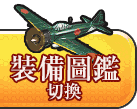
<style>
.page{position:relative;width:137px;height:109px}
.page>*{position:absolute;margin:0}
.t1{font:28px "RyuminPro-Bold";color:#f9f1ec}
.t2{font:18px "RyuminPro-Bold";color:#f9f1ec}
</style>
<div class="page">
<p class="t1" style="left:11px;top:55px;width:108px;height:27px">裝備圖鑑</p>
<p class="t2" style="left:47px;top:82px;width:34px;height:18px">切換</p>
</div>
